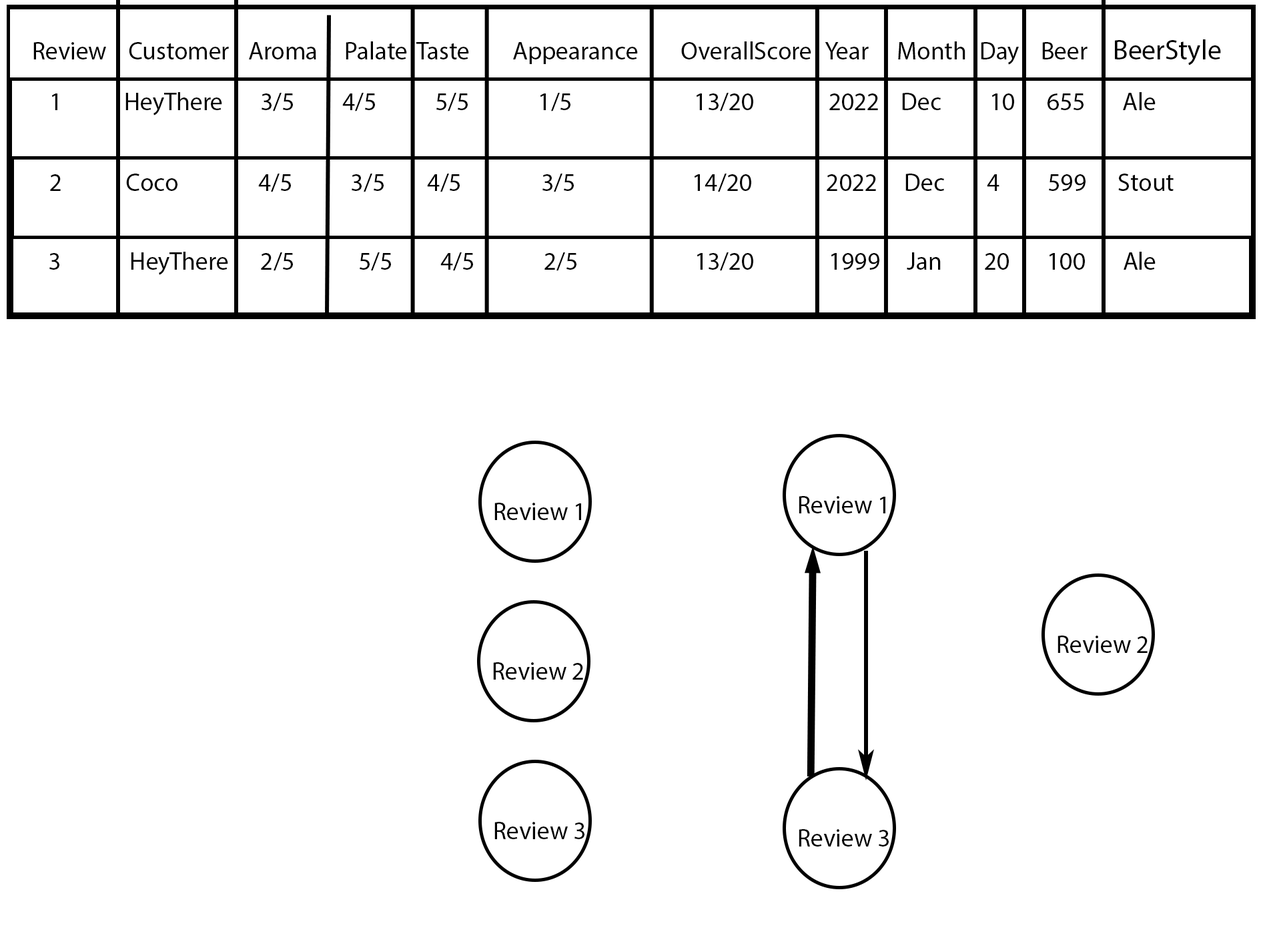
<style>
.page{position:relative;width:1261px;height:946px;background:#ffffff}
.page>*{position:absolute;margin:0}
.t1{font:25px "MyriadPro-Regular";color:#000000}
.t2{font:27.8px "MyriadPro-Regular";color:#000000}
</style>
<div class="page">
<p class="t1" style="left:33px;top:39px;width:1188px;height:26px">Review Customer Aroma  Palate Taste  Appearance  OverallScore Year  Month   Day Beer  <span class="t2">BeerStyle</span></p>
<p class="t1" style="left:51px;top:92px;width:1105px;height:23px">1     HeyThere       3/5         4/5           5/5             1/5                       13/20              2022    Dec         10      655       Ale<br><br><br><br>fff</p>
<p class="t1" style="left:50px;top:173px;width:1124px;height:19px">2            Coco               4/5           3/5        4/5               3/5                      14/20              2022     Dec        4         599      Stout</p>
<p class="t1" style="left:49px;top:252px;width:1107px;height:23px">3             HeyThere      2/5            5/5         4/5             2/5                      13/20              1999     Jan        20       100       Ale</p>
<p class="t1" style="left:799px;top:496px;width:86px;height:17px">Review 1</p>
<p class="t1" style="left:494px;top:502px;width:87px;height:18px">Review 1</p>
<p class="t1" style="left:1058px;top:635px;width:90px;height:18px">Review 2</p>
<p class="t1" style="left:493px;top:662px;width:90px;height:17px">Review 2</p>
<p class="t1" style="left:494px;top:821px;width:91px;height:18px">Review 3</p>
<p class="t1" style="left:799px;top:829px;width:90px;height:17px">Review 3</p>
</div>
